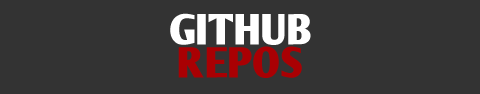
<style>
.page{position:relative;width:480px;height:94px;background:#333333}
.page>*{position:absolute;margin:0}
.t1{font:42.5px "ArmWrestler-Bold";color:#ffffff}
.t2{font:42.5px "ArmWrestler-Bold";color:#a90003}
</style>
<div class="page">
<p class="t1" style="left:170px;top:13px;width:141px;height:32px">GITHUB</p>
<p class="t2" style="left:178px;top:46px;width:124px;height:32px">REPOS</p>
</div>
